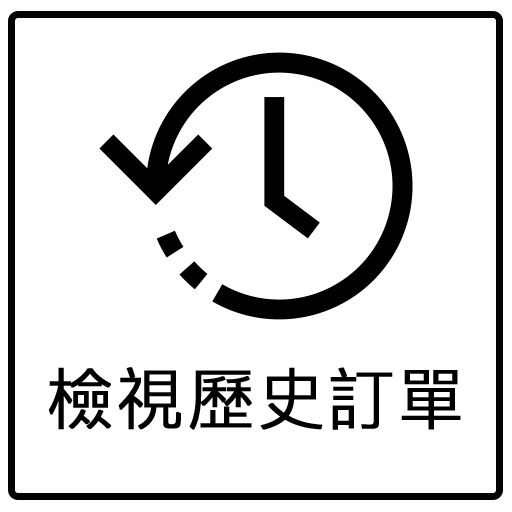
<style>
.page{position:relative;width:512px;height:512px;background:#ffffff}
.page>*{position:absolute;margin:0}
.t1{font:66.7px "PingFangTC-Light";letter-spacing:0.026em;color:#000000;font-weight:bold}
</style>
<div class="page">
<p class="t1" style="left:49px;top:367px;width:412px;height:63px">檢視歷史訂單</p>
</div>
